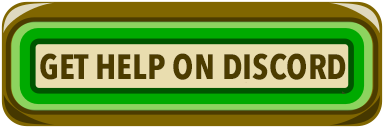
<style>
.page{position:relative;width:384px;height:128px}
.page>*{position:absolute;margin:0}
.t1{font:35px "AvenirNextCondensed-Bold";color:#4c3c00}
</style>
<div class="page">
<p class="t1" style="left:40px;top:53px;width:306px;height:27px">GET HELP ON DISCORD</p>
</div>
